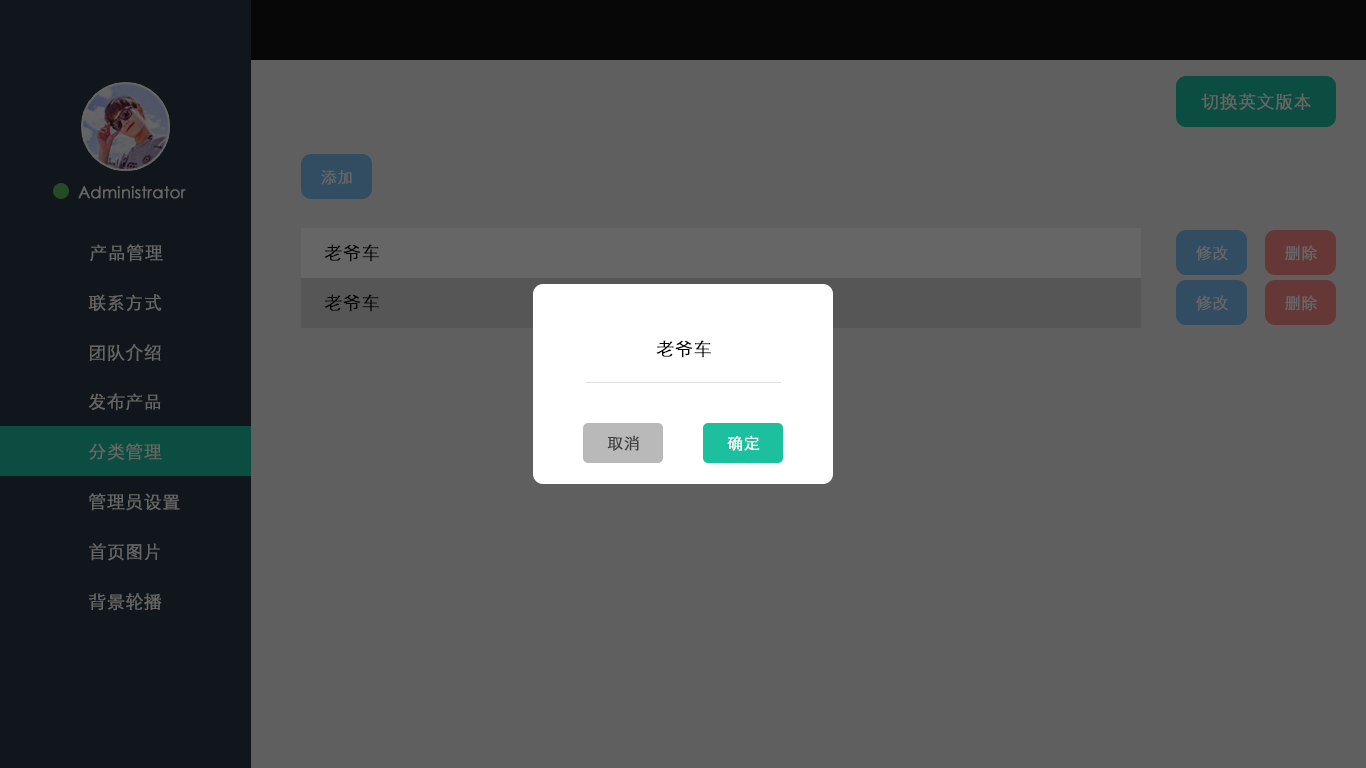
<style>
.page{position:relative;width:1366px;height:768px;background:#5f5f5f}
.page>*{position:absolute;margin:0}
.t1{font:18px "STXihei";color:#666666;font-weight:bold}
.t2{font:16px "STXihei";color:#666666;font-weight:bold}
.t3{font:18px "STXihei";color:#000000;font-weight:bold}
.t4{font:16px "STXihei";color:#404040;font-weight:bold}
.t5{font:16px "STXihei";color:#ffffff;font-weight:bold}
</style>
<div class="page">
<p class="t1" style="left:1201px;top:93px;width:110px;height:17px">切换英文版本</p>
<p class="t2" style="left:321px;top:170px;width:31px;height:15px">添加</p>
<p class="t2" style="left:78px;top:186px;width:108px;height:13px">Administrator</p>
<p class="t1" style="left:90px;top:244px;width:73px;height:18px">产品管理</p>
<p class="t3" style="left:324px;top:244px;width:55px;height:18px">老爷车</p>
<p class="t2" style="left:1196px;top:245px;width:32px;height:16px">修改</p>
<p class="t2" style="left:1285px;top:245px;width:32px;height:16px">删除</p>
<p class="t1" style="left:88px;top:294px;width:74px;height:17px">联系方式</p>
<p class="t3" style="left:324px;top:294px;width:55px;height:18px">老爷车</p>
<p class="t2" style="left:1196px;top:295px;width:32px;height:16px">修改</p>
<p class="t2" style="left:1285px;top:295px;width:32px;height:16px">删除</p>
<p class="t3" style="left:656px;top:340px;width:55px;height:18px">老爷车</p>
<p class="t1" style="left:89px;top:344px;width:72px;height:17px">团队介绍</p>
<p class="t1" style="left:88px;top:393px;width:73px;height:18px">发布产品</p>
<p class="t4" style="left:607px;top:435px;width:32px;height:16px">取消</p>
<p class="t5" style="left:727px;top:435px;width:33px;height:16px">确定</p>
<p class="t1" style="left:89px;top:443px;width:73px;height:18px">分类管理</p>
<p class="t1" style="left:89px;top:493px;width:91px;height:18px">管理员设置</p>
<p class="t1" style="left:89px;top:543px;width:71px;height:18px">首页图片</p>
<p class="t1" style="left:89px;top:593px;width:73px;height:18px">背景轮播</p>
</div>
